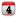
<style>
.page{position:relative;width:17px;height:17px;background:#ffffff}
.page>*{position:absolute;margin:0}
.t1{font:9.6px "BookAntiqua";color:#000000;font-weight:bold}
</style>
<div class="page">
<p class="t1" style="left:6px;top:6px;width:6px;height:8px">4</p>
</div>
